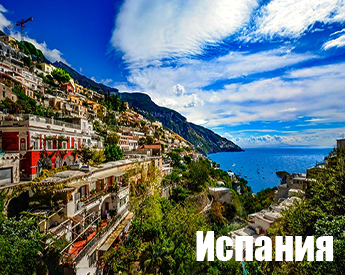
<style>
.page{position:relative;width:345px;height:275px}
.page>*{position:absolute;margin:0}
.t1{font:38px "Impact";color:#ffffff}
</style>
<div class="page">
<p class="t1" style="left:196px;top:231px;width:137px;height:30px">Испания</p>
</div>
